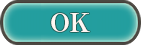
<style>
.page{position:relative;width:141px;height:45px;background:#239e9f}
.page>*{position:absolute;margin:0}
.t1{font:26px "RyuminPro-ExBold";color:#fff6f3}
</style>
<div class="page">
<p class="t1" style="left:51px;top:13px;width:39px;height:19px">OK</p>
</div>
